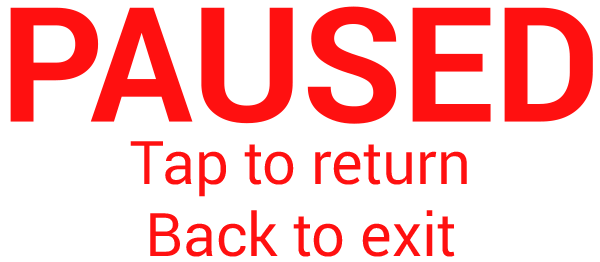
<style>
.page{position:relative;width:600px;height:262px;background:#ffffff}
.page>*{position:absolute;margin:0}
.t1{font:160px "Roboto-Bold";color:#ff1010}
.t2{font:60px "Roboto-Regular";color:#ff1010}
</style>
<div class="page">
<p class="t1" style="left:10px;top:6px;width:583px;height:118px">PAUSED</p>
<p class="t2" style="left:130px;top:141px;width:337px;height:116px;text-align:center">Tap to return<br>Back to exit</p>
</div>
